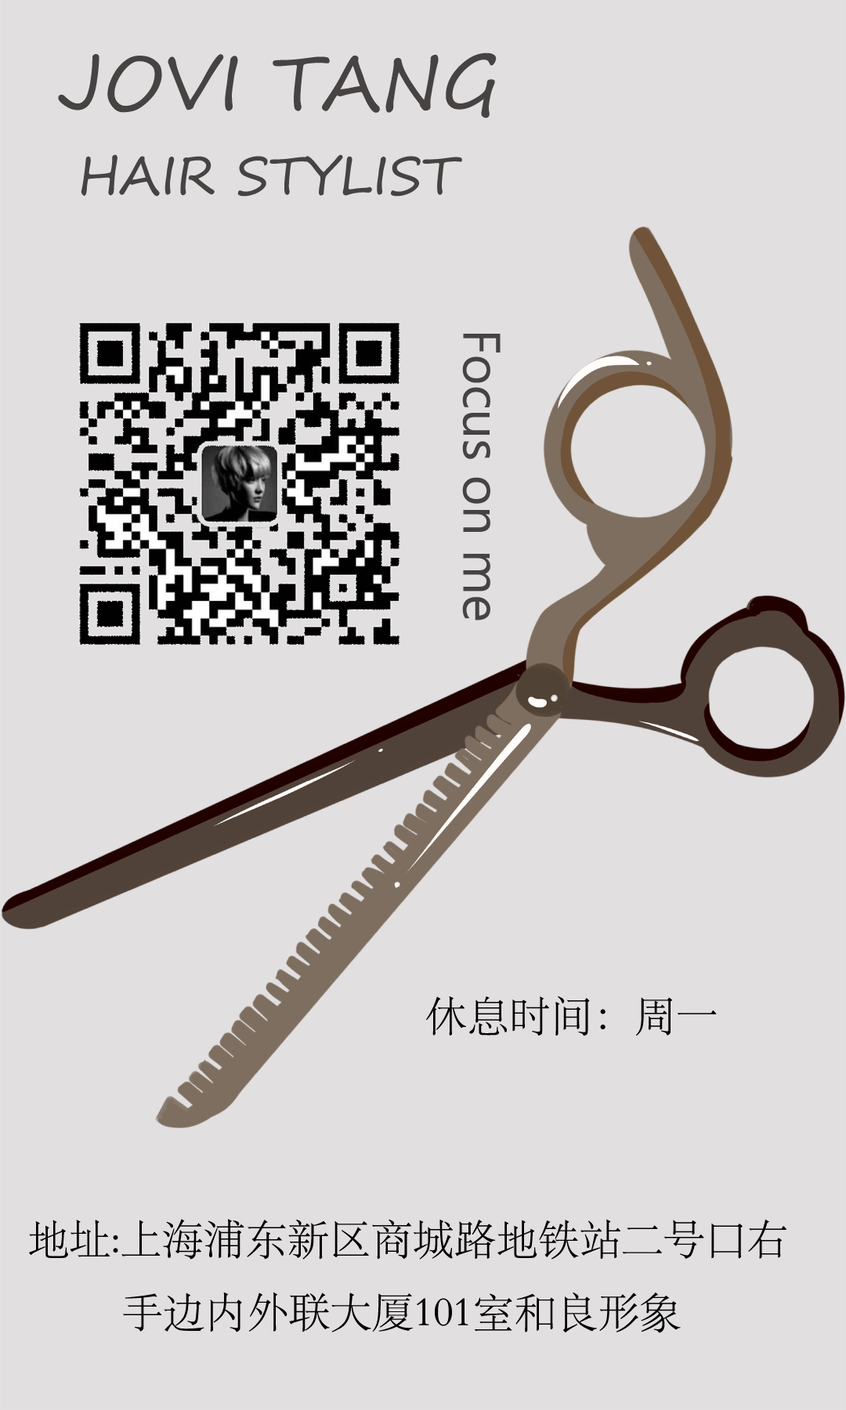
<style>
.page{position:relative;width:846px;height:1410px;background:#e1dfdf}
.page>*{position:absolute;margin:0}
.t1{font:75.2px "SegoePrint";color:#464342}
.t2{font:52.2px "SegoePrint";color:#464342}
.t3{font:52.2px "SegoeUI";color:#464342}
.t4{font:41.8px "STSong";color:#000000}
</style>
<div class="page">
<p class="t1" style="left:58px;top:52px;width:439px;height:66px">JOVI TANG</p>
<p class="t2" style="left:81px;top:154px;width:381px;height:43px">HAIR STYLIST</p>
<p class="t3" style="left:462px;top:334px;width:38px;height:286px">Focus on me</p>
<p class="t4" style="left:426px;top:995px;width:291px;height:41px">休息时间：周一</p>
<p class="t4" style="left:29px;top:1219px;width:757px;height:114px">地址:上海浦东新区商城路地铁站二号口右          手边内外联大厦101室和良形象</p>
</div>
